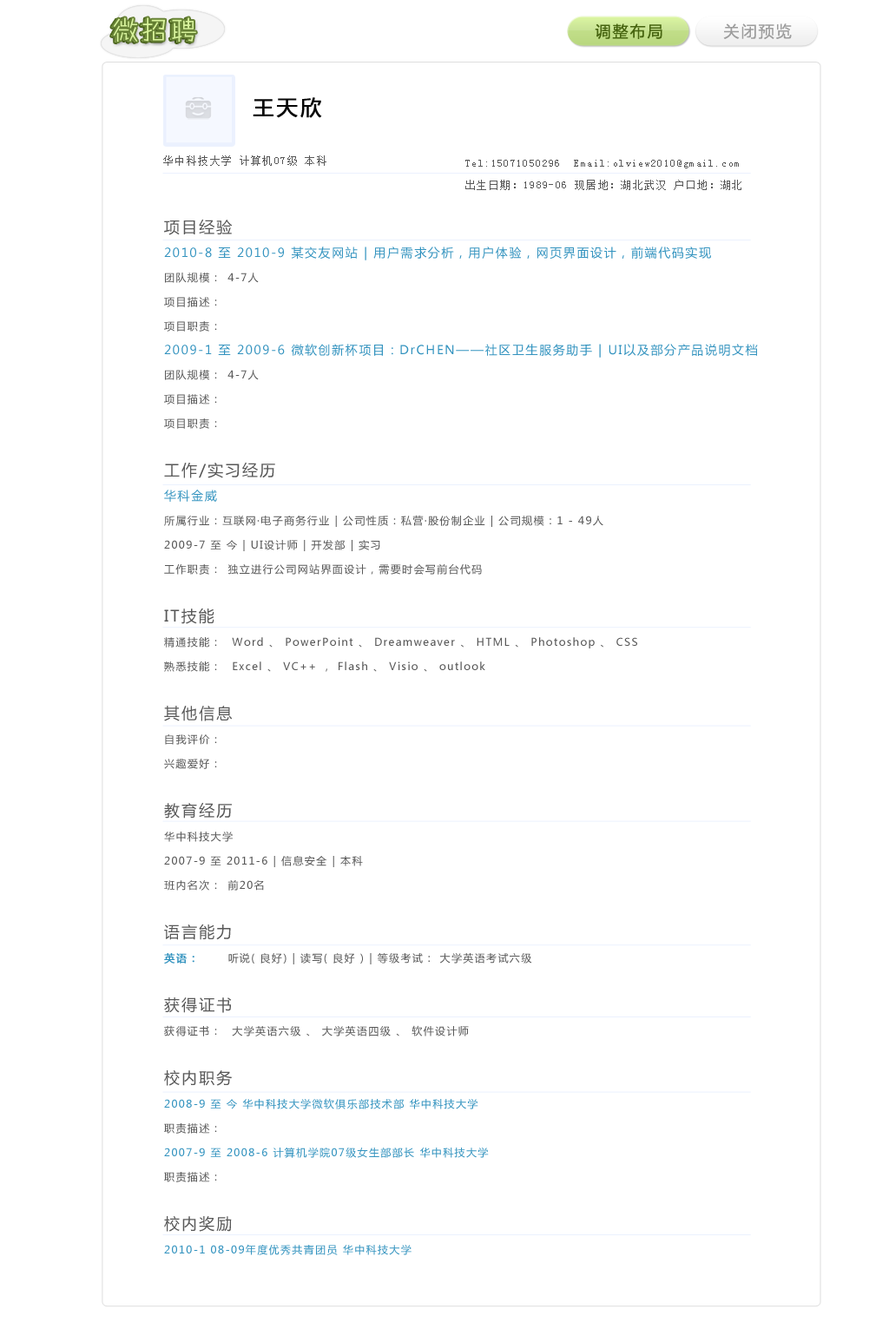
<style>
.page{position:relative;width:889px;height:1342px;background:#ffffff}
.page>*{position:absolute;margin:0}
.t1{font:15.6px "MicrosoftYaHei";letter-spacing:0.115em;color:#45630e}
.t2{font:15.6px "MicrosoftYaHei";letter-spacing:0.115em;color:#9d9d9d}
.t3{font:20.8px "MicrosoftYaHei";letter-spacing:0.115em;color:#060606;font-weight:bold}
.t4{font:10.4px "SimSun";letter-spacing:0.115em;color:#585858}
.t5{font:10.4px/24.3px "MicrosoftYaHei";letter-spacing:0.115em;color:#585858}
.t6{font:15.6px/24.3px "MicrosoftYaHei";letter-spacing:0.115em;color:#585858}
.t7{font:12.2px/24.3px "MicrosoftYaHei";letter-spacing:0.115em;color:#3393bf}
.t8{font:10.4px/24.3px "MicrosoftYaHei";letter-spacing:0.115em;color:#3393bf;font-weight:bold}
.t9{font:10.4px/24.3px "MicrosoftYaHei";letter-spacing:0.115em;color:#3393bf}
</style>
<div class="page">
<p class="t1" style="left:595px;top:23px;width:67px;height:16px">调整布局</p>
<p class="t2" style="left:723px;top:23px;width:69px;height:17px">关闭预览</p>
<p class="t3" style="left:253px;top:97px;width:69px;height:21px">王天欣</p>
<p class="t4" style="left:163px;top:155px;width:163px;height:11px">华中科技大学 计算机07级 本科</p>
<p class="t4" style="left:465px;top:160px;width:274px;height:8px">Tel:15071050296  Email:olview2010@gmail.com</p>
<p class="t4" style="left:465px;top:180px;width:276px;height:10px">出生日期：1989-06 现居地：湖北武汉 户口地：湖北</p>
<p class="t5" style="left:164px;top:219px;width:594px;height:1036px"><span class="t6">项目经验<br></span><span class="t7">2010-8 至 2010-9 某交友网站 | 用户需求分析，用户体验，网页界面设计，前端代码实现<br></span>团队规模： 4-7人<br>项目描述： <br>项目职责： <br><span class="t7">2009-1 至 2009-6 微软创新杯项目：DrCHEN——社区卫生服务助手 | UI以及部分产品说明文档<br></span>团队规模： 4-7人<br>项目描述： <br>项目职责：<br><br><span class="t6">工作/实习经历<br></span><span class="t7">华科金威<br></span>所属行业：互联网·电子商务行业 | 公司性质：私营·股份制企业 | 公司规模：1 - 49人<br>2009-7 至 今 | UI设计师 | 开发部 | 实习<br>工作职责： 独立进行公司网站界面设计，需要时会写前台代码<br><br><span class="t6">IT技能<br></span>精通技能：  Word 、 PowerPoint 、 Dreamweaver 、 HTML 、 Photoshop 、 CSS<br>熟悉技能：  Excel 、 VC++ ， Flash 、 Visio 、 outlook<br><br><span class="t6">其他信息<br></span>自我评价： <br>兴趣爱好： <br><br><span class="t6">教育经历<br></span>华中科技大学<br>2007-9 至 2011-6 | 信息安全 | 本科<br>班内名次： 前20名<br><br><span class="t6">语言能力<br></span><span class="t8">英语：</span> 听说( 良好) | 读写( 良好 ) | 等级考试： 大学英语考试六级 <br><br><span class="t6">获得证书<br></span>获得证书：  大学英语六级 、 大学英语四级 、 软件设计师<br><br><span class="t6">校内职务<br></span><span class="t9">2008-9 至 今 华中科技大学微软俱乐部技术部 华中科技大学<br></span>职责描述： <br><span class="t9">2007-9 至 2008-6 计算机学院07级女生部部长 华中科技大学<br></span>职责描述： <br><br><span class="t6">校内奖励<br></span><span class="t9">2010-1 08-09年度优秀共青团员 华中科技大学</span></p>
</div>
